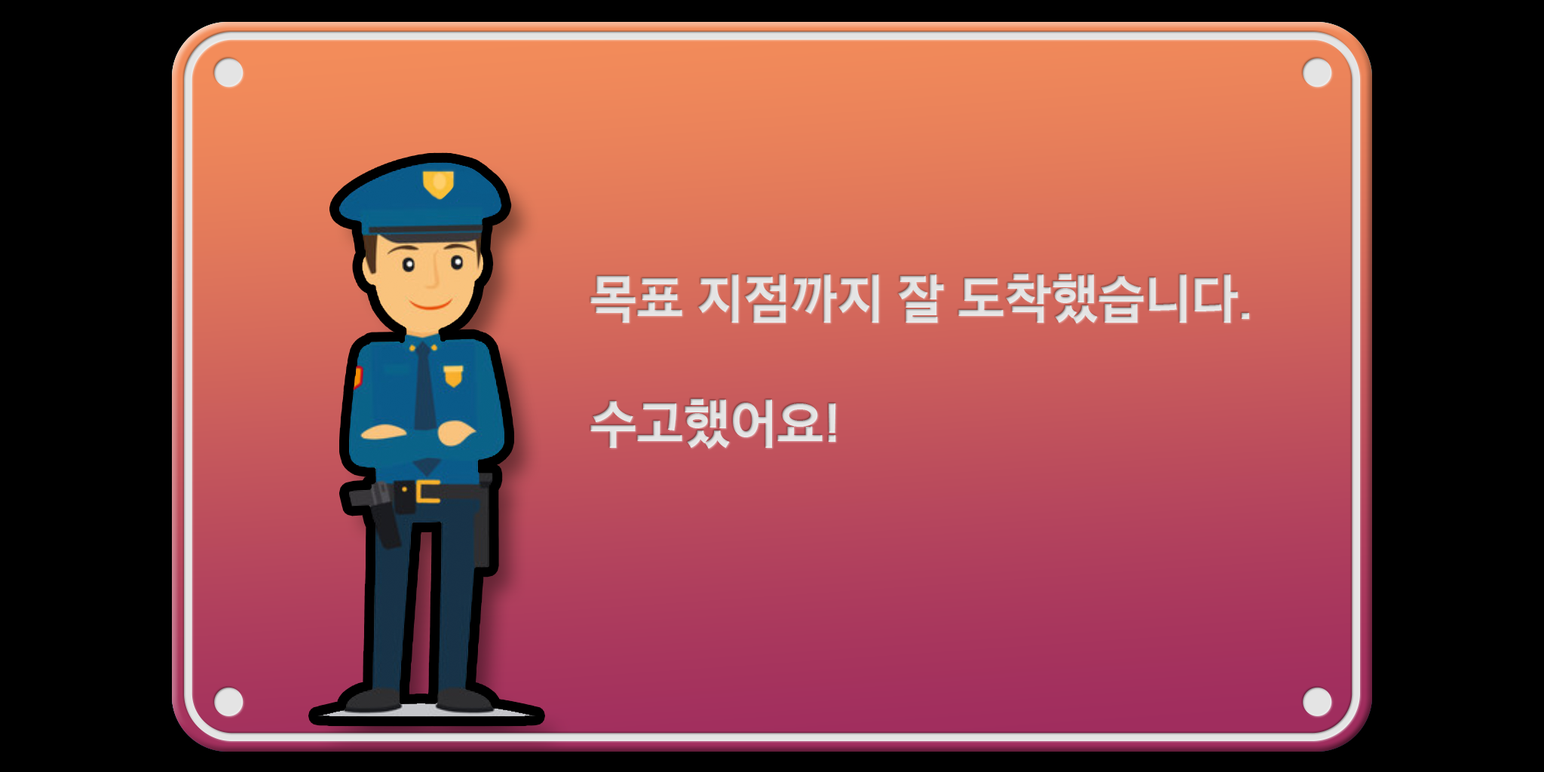
<style>
.page{position:relative;width:1544px;height:772px;background:#000000}
.page>*{position:absolute;margin:0}
.t1{font:52px "SECGCB";color:#e4e4e4}
</style>
<div class="page">
<p class="t1" style="left:590px;top:274px;width:659px;height:175px">목표 지점까지 잘 도착했습니다.<br><br>수고했어요!</p>
</div>
